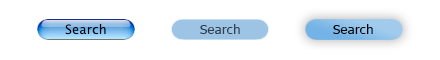
<style>
.page{position:relative;width:440px;height:60px;background:#ffffff}
.page>*{position:absolute;margin:0}
.t1{font:13px "Tahoma";letter-spacing:0.025em;color:#33414e}
.t2{font:13px "Tahoma";letter-spacing:0.025em;color:#000000}
</style>
<div class="page">
<p class="t1" style="left:200px;top:24px;width:40px;height:10px">Search</p>
<p class="t2" style="left:333px;top:24px;width:40px;height:10px">Search</p>
</div>
